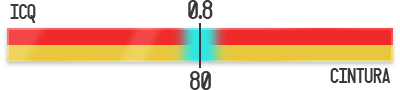
<style>
.page{position:relative;width:400px;height:90px;background:#ffffff}
.page>*{position:absolute;margin:0}
.t1{font:19px "Targa";color:#383838}
.t2{font:24px "Targa";color:#383838}
</style>
<div class="page">
<p class="t1" style="left:10px;top:4px;width:26px;height:19px">ICQ</p>
<p class="t2" style="left:188px;top:0px;width:25px;height:19px">0.8</p>
<p class="t2" style="left:190px;top:71px;width:21px;height:19px">80</p>
<p class="t1" style="left:330px;top:68px;width:60px;height:15px">CINTURA</p>
</div>
